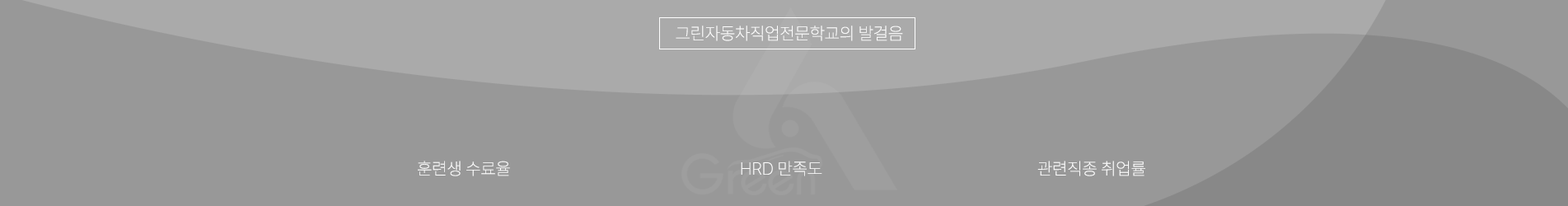
<style>
.page{position:relative;width:1568px;height:206px;background:#989898}
.page>*{position:absolute;margin:0}
.t1{font:17.5px "Pretendard-Thin";color:#ffffff}
.t2{font:17.3px "Pretendard-Thin";color:#ffffff}
</style>
<div class="page">
<p class="t1" style="left:676px;top:26px;width:227px;height:15px">그린자동차직업전문학교의 발걸음</p>
<p class="t2" style="left:418px;top:161px;width:92px;height:15px">훈련생 수료율</p>
<p class="t2" style="left:741px;top:161px;width:81px;height:15px">HRD 만족도</p>
<p class="t2" style="left:1037px;top:161px;width:108px;height:15px">관련직종 취업률</p>
</div>
